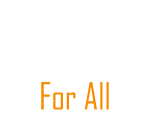
<style>
.page{position:relative;width:150px;height:119px;background:#ffffff}
.page>*{position:absolute;margin:0}
.t1{font:36px "AgencyFB-Reg";color:#f88c00}
</style>
<div class="page">
<p class="t1" style="left:41px;top:82px;width:68px;height:28px">For All</p>
</div>
